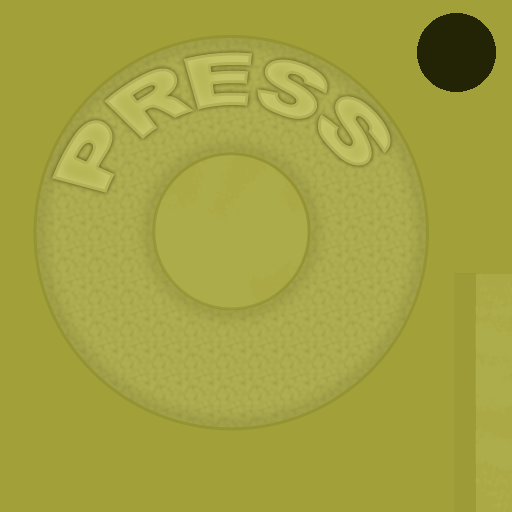
<style>
.page{position:relative;width:512px;height:512px;background:#a1a039}
.page>*{position:absolute;margin:0}
.t1{font:60px "Arial-Black";color:#bdbc5e}
</style>
<div class="page">
<p class="t1" style="left:52px;top:52px;width:339px;height:141px;rotate:-6deg">PRESS</p>
</div>
